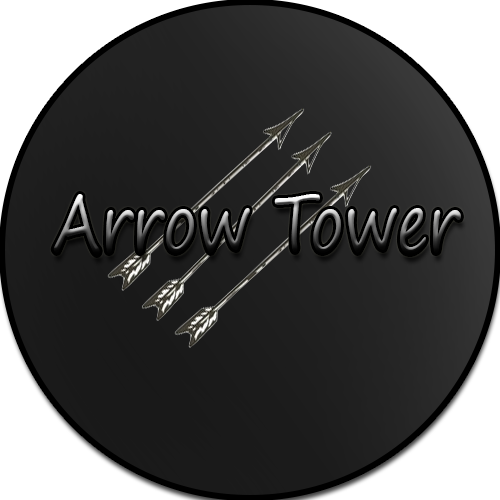
<style>
.page{position:relative;width:500px;height:500px}
.page>*{position:absolute;margin:0}
.t1{font:80.2px "SegoePrint";scale:0.75 1}
</style>
<div class="page">
<p class="t1" style="left:53px;top:194px;width:408px;height:61px">Arrow Tower</p>
</div>
